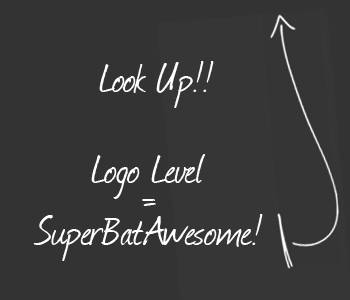
<style>
.page{position:relative;width:350px;height:300px;background:#333333}
.page>*{position:absolute;margin:0}
.t1{font:48px "Journal";color:#ffffff}
</style>
<div class="page">
<p class="t1" style="left:99px;top:61px;width:115px;height:47px">Look Up!!</p>
<p class="t1" style="left:91px;top:154px;width:115px;height:45px">Logo Level</p>
<p class="t1" style="left:142px;top:199px;width:14px;height:7px">=</p>
<p class="t1" style="left:33px;top:214px;width:230px;height:47px">SuperBatAwesome!</p>
</div>
